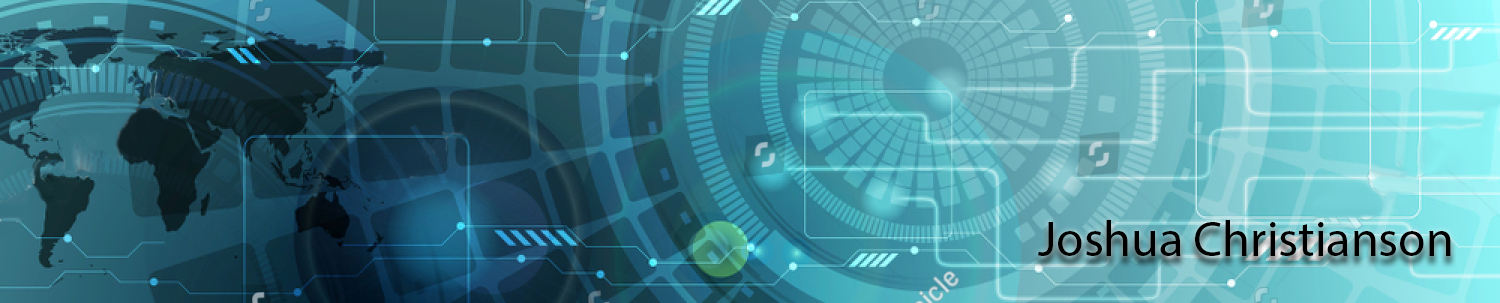
<style>
.page{position:relative;width:1500px;height:303px}
.page>*{position:absolute;margin:0}
.t1{font:50px "MyriadPro-Regular";color:#000000}
</style>
<div class="page">
<p class="t1" style="left:1038px;top:220px;width:413px;height:36px">Joshua Christianson</p>
</div>
